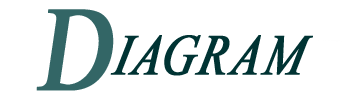
<style>
.page{position:relative;width:350px;height:100px;background:#ffffff}
.page>*{position:absolute;margin:0}
.t1{font:57.6px "TimesNewRomanPS-ItalicMT";letter-spacing:0.025em;color:#003333;font-weight:bold;font-style:italic;scale:0.83 1}
.t2{font:120px "TimesNewRomanPSMT";letter-spacing:0.025em;color:#336666;font-weight:bold;font-style:italic;scale:0.83 1}
</style>
<div class="page">
<p class="t1" style="left:36px;top:9px;width:277px;height:82px"><span class="t2">D</span>IAGRAM</p>
</div>
